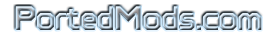
<style>
.page{position:relative;width:277px;height:37px;background:#ffffff}
.page>*{position:absolute;margin:0}
.t1{font:30px "PerfectPixel"}
</style>
<div class="page">
<p class="t1" style="left:15px;top:6px;width:247px;height:24px">PortedMods.com</p>
</div>
